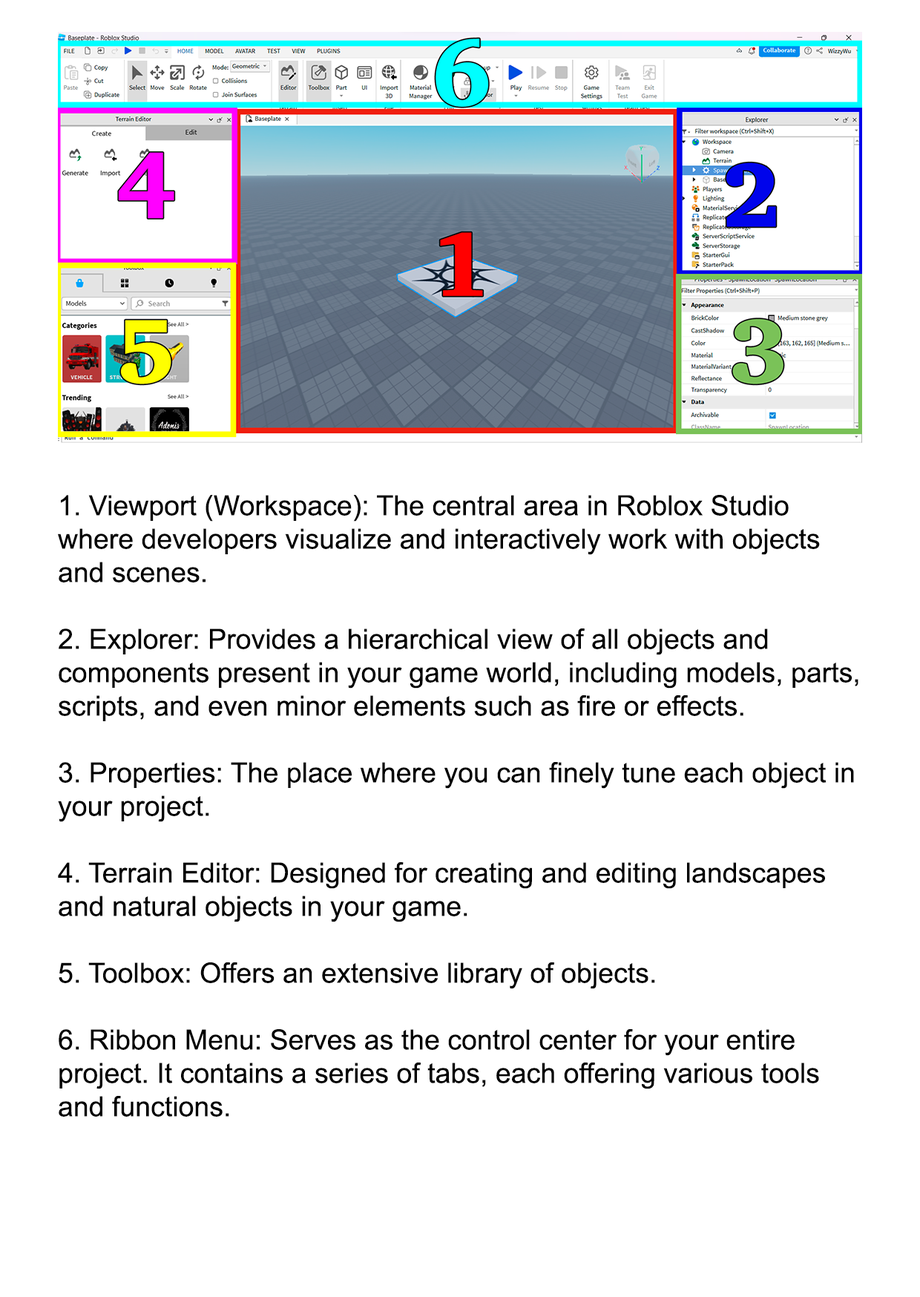
<style>
.page{position:relative;width:920px;height:1297px;background:#ffffff}
.page>*{position:absolute;margin:0}
.t1{font:27.8px "ArialMT";color:#000000}
</style>
<div class="page">
<p class="t1" style="left:58px;top:495px;width:800px;height:621px">1. Viewport (Workspace): The central area in Roblox Studio where developers visualize and interactively work with objects and scenes.<br><br>2. Explorer: Provides a hierarchical view of all objects and components present in your game world, including models, parts, scripts, and even minor elements such as fire or effects.<br><br>3. Properties: The place where you can finely tune each object in your project.<br><br>4. Terrain Editor: Designed for creating and editing landscapes and natural objects in your game.<br><br>5. Toolbox: Offers an extensive library of objects.<br><br>6. Ribbon Menu: Serves as the control center for your entire project. It contains a series of tabs, each offering various tools and functions.</p>
</div>
